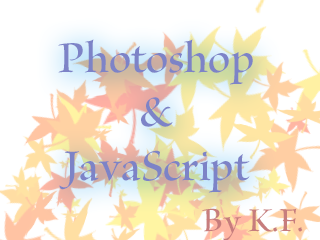
<style>
.page{position:relative;width:320px;height:240px;background:#ffffff}
.page>*{position:absolute;margin:0}
.t1{font:45px "KazurakiSPN-Light";color:#7d83c7}
.t2{font:34px "KazurakiSPN-Light";color:#c77d7d}
</style>
<div class="page">
<p class="t1" style="left:58px;top:39px;width:195px;height:154px;text-align:center">Photoshop<br>&amp;<br>JavaScript</p>
<p class="t2" style="left:202px;top:208px;width:101px;height:33px">By K.F.</p>
</div>
